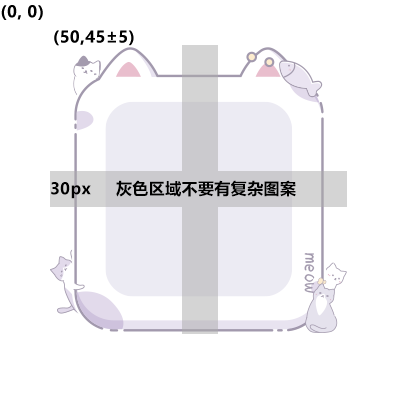
<style>
.page{position:relative;width:400px;height:400px;background:#ffffff}
.page>*{position:absolute;margin:0}
.t1{font:16px "MicrosoftYaHei-Bold";letter-spacing:0.025em;color:#000000}
</style>
<div class="page">
<p class="t1" style="left:1px;top:5px;width:42px;height:15px">(0, 0)</p>
<p class="t1" style="left:54px;top:30px;width:80px;height:16px">(50,45±5)</p>
<p class="t1" style="left:51px;top:182px;width:40px;height:17px">30px</p>
<p class="t1" style="left:116px;top:180px;width:180px;height:17px">灰色区域不要有复杂图案</p>
</div>
